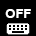
<style>
.page{position:relative;width:36px;height:36px;background:#000000}
.page>*{position:absolute;margin:0}
.t1{font:13px "Swiss721BT-Bold";color:#ffffff}
</style>
<div class="page">
<p class="t1" style="left:5px;top:9px;width:26px;height:9px">OFF</p>
</div>
